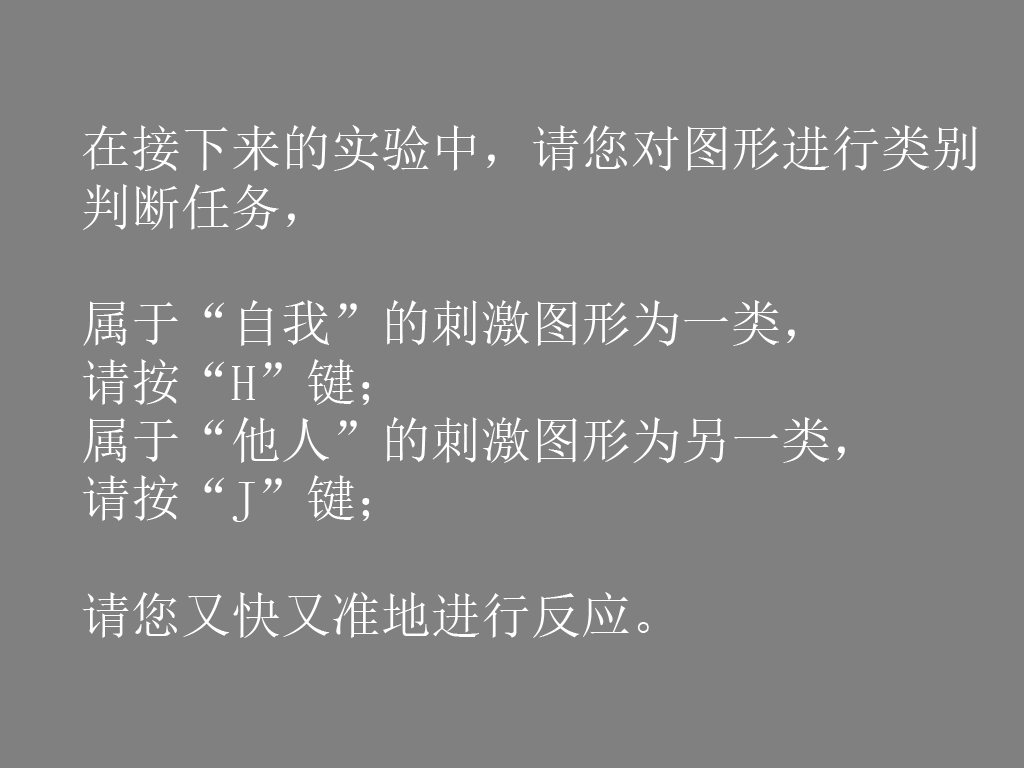
<style>
.page{position:relative;width:1024px;height:768px;background:#808080}
.page>*{position:absolute;margin:0}
.t1{font:50px/58.3px "SimSun";color:#ffffff}
</style>
<div class="page">
<p class="t1" style="left:82px;top:125px;width:895px;height:513px">在接下来的实验中，请您对图形进行类别<br>判断任务，<br><br>属于“自我”的刺激图形为一类，<br>请按“H”键；<br>属于“他人”的刺激图形为另一类，<br>请按“J”键；<br><br>请您又快又准地进行反应。</p>
</div>
